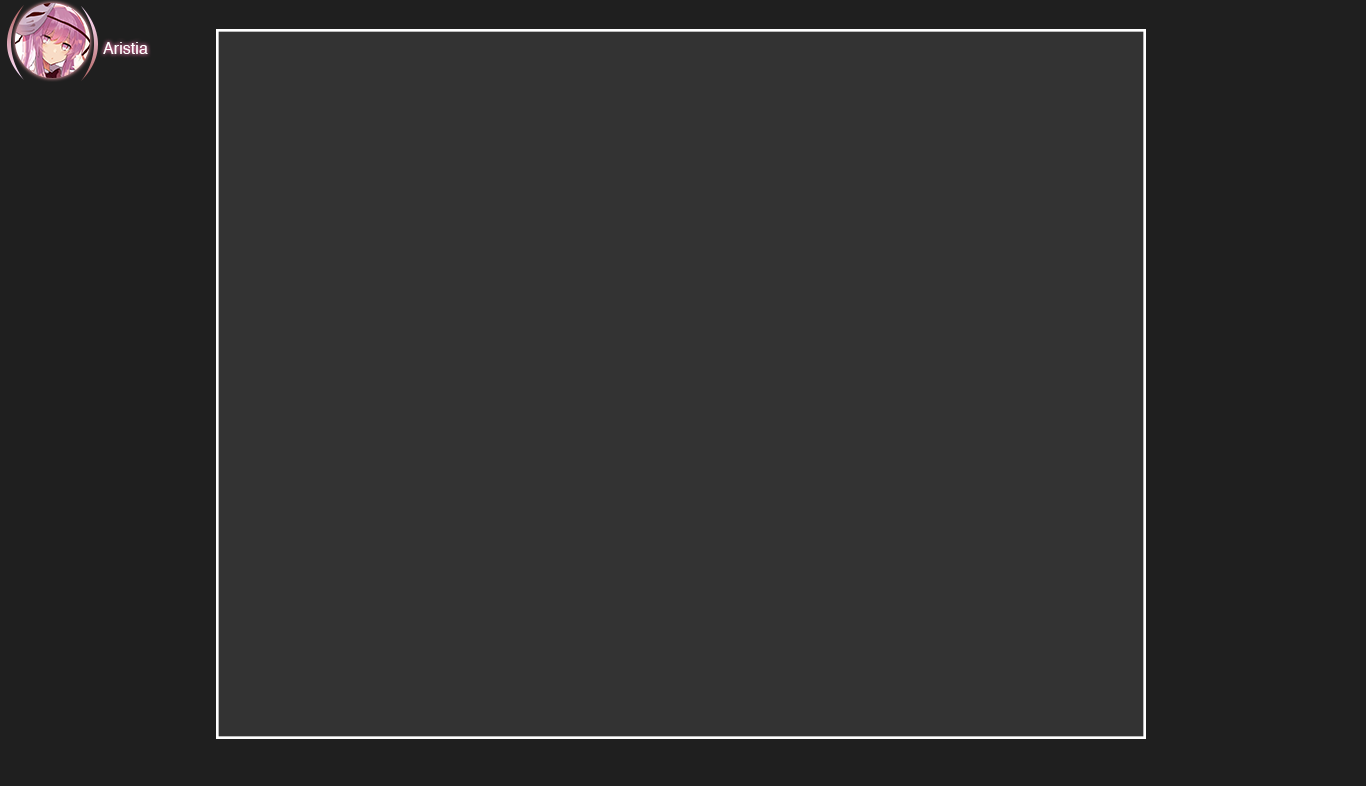
<style>
.page{position:relative;width:1366px;height:786px;background:#333333}
.page>*{position:absolute;margin:0}
.t1{font:16px "Helvetica";color:#ffffff}
</style>
<div class="page">
<p class="t1" style="left:103px;top:42px;width:45px;height:12px">Aristia</p>
</div>
